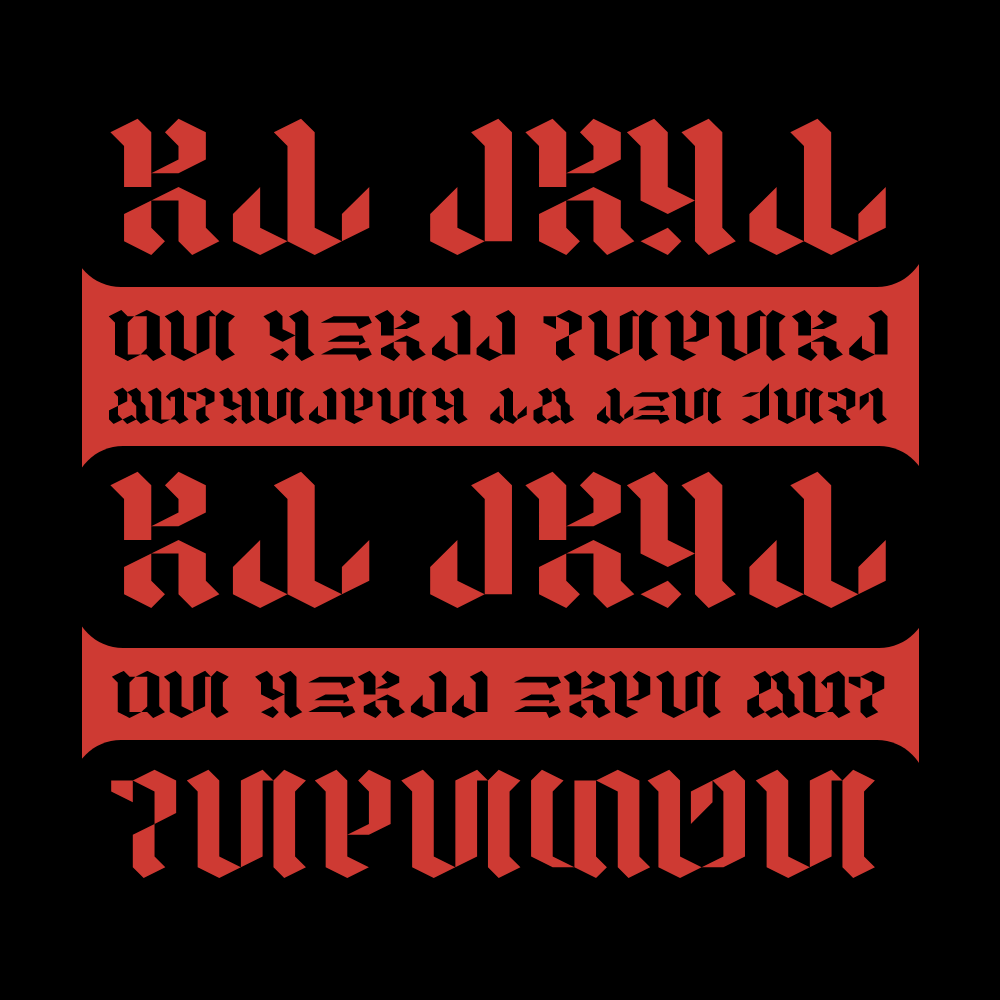
<style>
.page{position:relative;width:1000px;height:1000px;background:#000000}
.page>*{position:absolute;margin:0}
.t1{font:141px "Maulobesh";color:#ce3a33}
.t2{font:66px "Maulobesh";color:#000000}
.t3{font:47px "Maulobesh";color:#000000}
.t4{font:61px "Maulobesh";color:#000000}
.t5{font:112px "Maulobesh";color:#ce3a33}
</style>
<div class="page">
<p class="t1" style="left:110px;top:118px;width:776px;height:137px">AT LAST</p>
<p class="t2" style="left:108px;top:309px;width:780px;height:52px">we shall reveal</p>
<p class="t3" style="left:109px;top:383px;width:778px;height:41px">ourselves to the Jedi</p>
<p class="t1" style="left:110px;top:471px;width:776px;height:137px">AT LAST</p>
<p class="t4" style="left:111px;top:670px;width:774px;height:48px">we shall have our</p>
<p class="t5" style="left:111px;top:769px;width:764px;height:109px">REVENGE</p>
</div>
